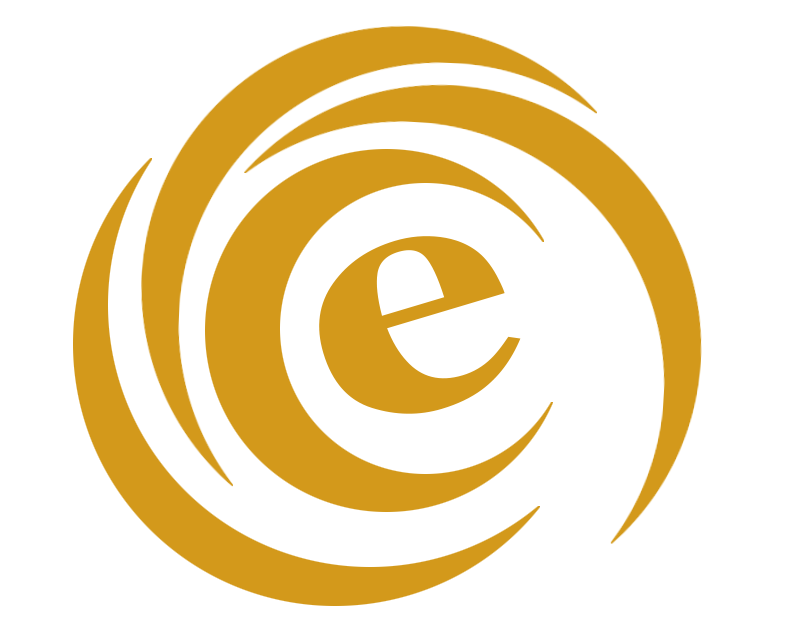
<style>
.page{position:relative;width:796px;height:642px;background:#ffffff}
.page>*{position:absolute;margin:0}
.t1{font:358.6px "Times-Bold";color:#d3991b;scale:1.34 1}
</style>
<div class="page">
<p class="t1" style="left:319px;top:236px;width:202px;height:178px;rotate:-17deg">e</p>
</div>
